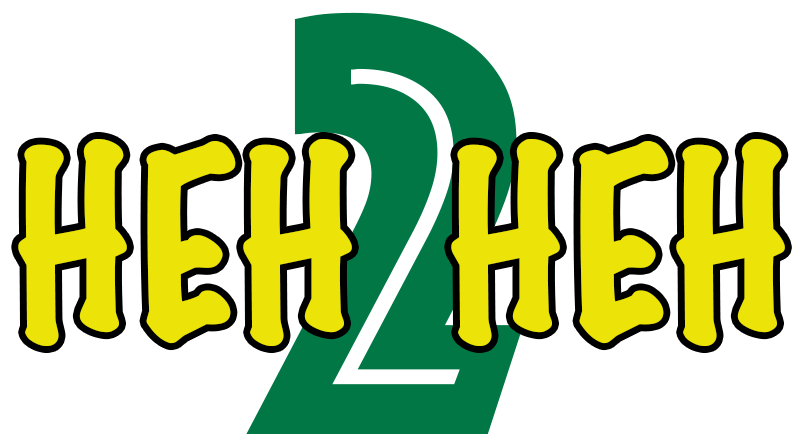
<style>
.page{position:relative;width:800px;height:447px;background:#ffffff}
.page>*{position:absolute;margin:0}
.t1{font:622.1px "Phosphate-Inline";color:#007745}
.t2{font:235.6px "MarkerFelt-Thin";color:#ece409}
</style>
<div class="page">
<p class="t1" style="left:246px;top:12px;width:278px;height:422px">2</p>
<p class="t2" style="left:18px;top:139px;width:334px;height:207px">HEH</p>
<p class="t2" style="left:451px;top:139px;width:334px;height:207px">HEH</p>
</div>
